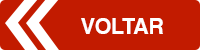
<style>
.page{position:relative;width:200px;height:50px;background:#c21b00}
.page>*{position:absolute;margin:0}
.t1{font:21.7px "Helvetica-Bold";letter-spacing:-0.025em;color:#ffffff}
</style>
<div class="page">
<p class="t1" style="left:81px;top:18px;width:82px;height:16px">VOLTAR</p>
</div>
